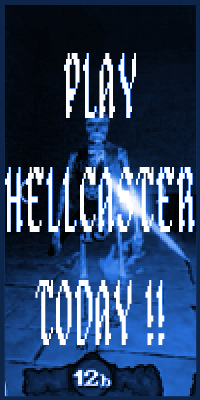
<style>
.page{position:relative;width:200px;height:400px}
.page>*{position:absolute;margin:0}
.t1{font:94.5px "Alagard";letter-spacing:0.04em;color:#ffffff;scale:0.33 1}
</style>
<div class="page">
<p class="t1" style="left:5px;top:53px;width:190px;height:292px;text-align:center">PLAY<br>HELLCASTER<br>TODAY !!</p>
</div>
